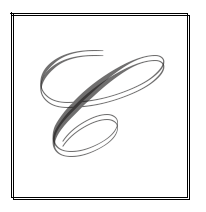
<style>
.page{position:relative;width:206px;height:212px;background:#ffffff}
.page>*{position:absolute;margin:0}
.t1{font:150px "KunstlerScript";color:#706f6f}
.t2{font:150px "KunstlerScript"}
</style>
<div class="page">
<p class="t1" style="left:40px;top:50px;width:125px;height:102px">C</p>
<p class="t2" style="left:40px;top:55px;width:125px;height:102px">C</p>
</div>
